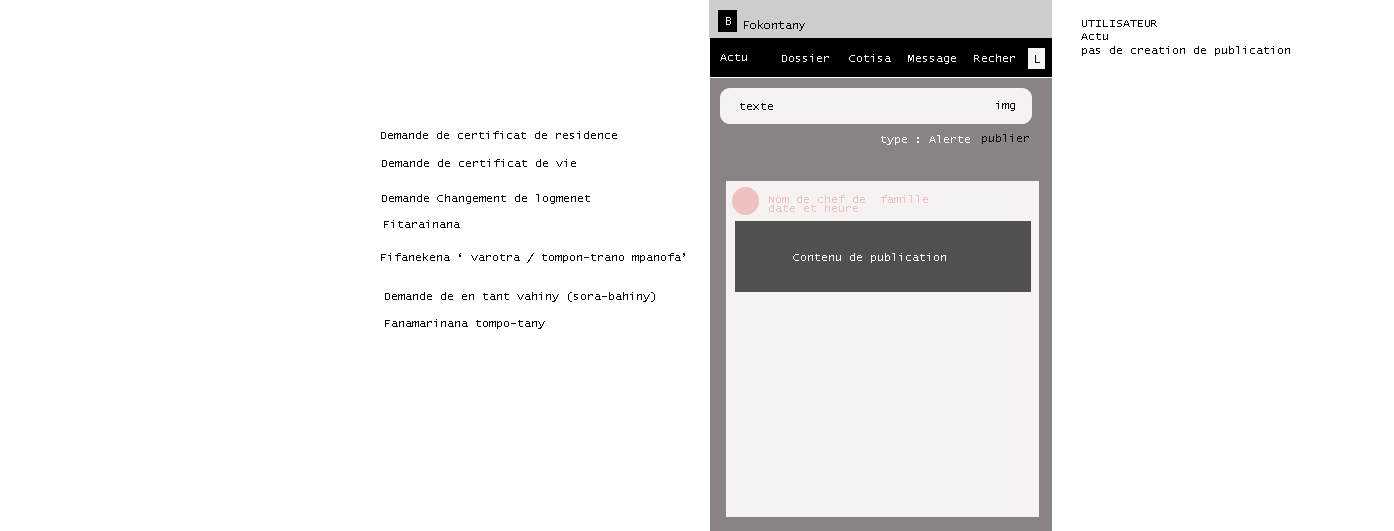
<style>
.page{position:relative;width:1394px;height:531px;background:#ffffff}
.page>*{position:absolute;margin:0}
.t1{font:11px "LucidaConsole";color:#080808}
.t2{font:11px "LucidaConsole";color:#f9efef}
.t3{font:11px "LucidaConsole";color:#f6f2f2}
.t4{font:12px "LucidaConsole";color:#0f0f0f}
.t5{font:11px "LucidaConsole";color:#0c0c0c}
.t6{font:11px "LucidaConsole";color:#fcf9f9}
.t7{font:11px "LucidaConsole";color:#f0c1c1}
</style>
<div class="page">
<p class="t1" style="left:1081px;top:20px;width:209px;height:36px">UTILISATEUR<br>Actu<br>pas de creation de publication</p>
<p class="t2" style="left:720px;top:54px;width:27px;height:7px">Actu</p>
<p class="t2" style="left:782px;top:54px;width:47px;height:8px">Dossier</p>
<p class="t2" style="left:849px;top:54px;width:42px;height:8px">Cotisa</p>
<p class="t3" style="left:908px;top:55px;width:48px;height:9px">Message</p>
<p class="t4" style="left:1035px;top:55px;width:5px;height:8px">L</p>
<p class="t5" style="left:996px;top:101px;width:19px;height:10px">img</p>
<p class="t5" style="left:740px;top:103px;width:33px;height:7px">texte</p>
<p class="t1" style="left:381px;top:131px;width:236px;height:8px">Demande de certificat de residence</p>
<p class="t6" style="left:881px;top:135px;width:89px;height:10px">type : Alerte</p>
<p class="t5" style="left:982px;top:134px;width:47px;height:10px">publier</p>
<p class="t1" style="left:382px;top:159px;width:194px;height:8px">Demande de certificat de vie</p>
<p class="t1" style="left:382px;top:194px;width:208px;height:10px">Demande Changement de logmenet</p>
<p class="t7" style="left:769px;top:195px;width:159px;height:8px">Nom de chef de  famille</p>
<p class="t7" style="left:769px;top:204px;width:89px;height:8px">date et heure</p>
<p class="t1" style="left:384px;top:220px;width:76px;height:8px">Fitarainana</p>
<p class="t1" style="left:381px;top:253px;width:304px;height:10px">Fifanekena ‘ varotra / tompon-trano mpanofa’</p>
<p class="t6" style="left:793px;top:253px;width:153px;height:10px">Contenu de publication</p>
<p class="t1" style="left:385px;top:292px;width:270px;height:37px">Demande de en tant vahiny (sora-bahiny)<br><br>Fanamarinana tompo-tany</p>
</div>
